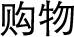
<style>
.page{position:relative;width:74px;height:37px;background:#ffffff}
.page>*{position:absolute;margin:0}
.t1{font:38.9px "STHeitiTC-Light";color:#000000}
</style>
<div class="page">
<p class="t1" style="left:0px;top:0px;width:74px;height:37px">购物</p>
</div>
